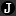
<style>
.page{position:relative;width:16px;height:16px;background:#333333}
.page>*{position:absolute;margin:0}
.t1{font:14.1px "GungsuhChe";color:#ffffff}
</style>
<div class="page">
<p class="t1" style="left:4px;top:3px;width:8px;height:10px">J</p>
</div>
